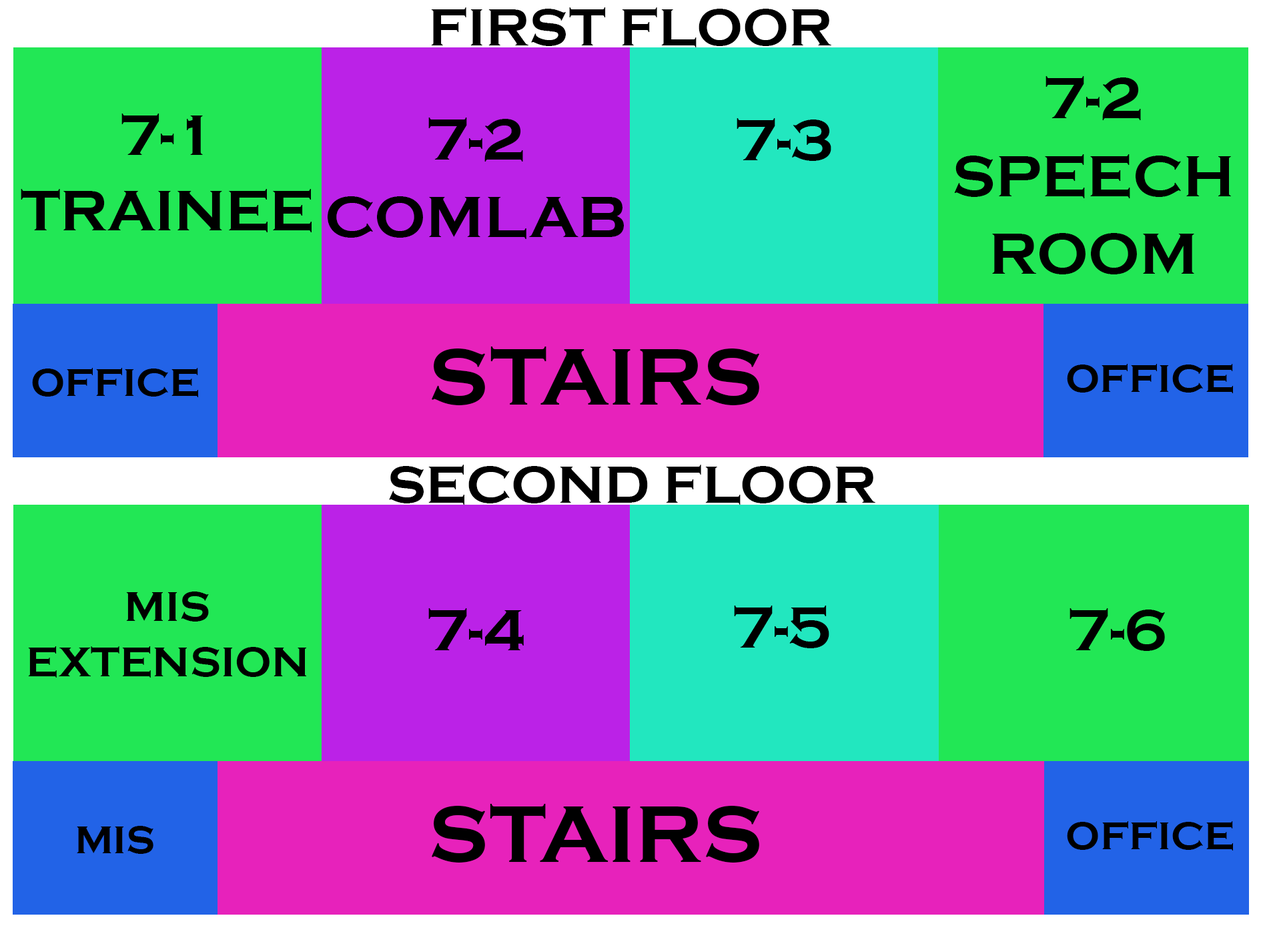
<style>
.page{position:relative;width:1261px;height:946px;background:#22e755}
.page>*{position:absolute;margin:0}
.t1{font:54.1px "CopperplateGothic-Bold";color:#000000}
.t2{font:60.2px/77.6px "CopperplateGothic-Bold";color:#000000}
.t3{font:58.5px/75.4px "CopperplateGothic-Bold";color:#000000}
.t4{font:60.2px "CopperplateGothic-Bold";color:#000000}
.t5{font:83.4px "CopperplateGothic-Bold";color:#000000}
.t6{font:39.8px "CopperplateGothic-Bold";color:#000000}
.t7{font:42.9px/55.3px "CopperplateGothic-Bold";color:#000000}
</style>
<div class="page">
<p class="t1" style="left:431px;top:7px;width:400px;height:40px">FIRST FLOOR</p>
<p class="t2" style="left:954px;top:76px;width:277px;height:198px;text-align:center">7-2<br>SPEECH<br>ROOM</p>
<p class="t3" style="left:21px;top:113px;width:291px;height:119px;text-align:center">7-1<br>TRAINEE</p>
<p class="t2" style="left:328px;top:117px;width:296px;height:122px;text-align:center">7-2<br>COMLAB</p>
<p class="t4" style="left:737px;top:118px;width:94px;height:43px">7-3</p>
<p class="t5" style="left:431px;top:346px;width:329px;height:59px">STAIRS</p>
<p class="t6" style="left:1067px;top:364px;width:166px;height:29px">OFFICE</p>
<p class="t6" style="left:32px;top:368px;width:166px;height:29px">OFFICE</p>
<p class="t1" style="left:389px;top:464px;width:486px;height:40px">SECOND FLOOR</p>
<p class="t7" style="left:28px;top:591px;width:278px;height:86px;text-align:center">MIS<br>EXTENSION</p>
<p class="t4" style="left:734px;top:605px;width:95px;height:43px">7-5</p>
<p class="t4" style="left:428px;top:608px;width:96px;height:42px">7-4</p>
<p class="t4" style="left:1070px;top:608px;width:95px;height:43px">7-6</p>
<p class="t5" style="left:431px;top:803px;width:329px;height:59px">STAIRS</p>
<p class="t6" style="left:1067px;top:821px;width:166px;height:29px">OFFICE</p>
<p class="t6" style="left:77px;top:825px;width:76px;height:28px">MIS</p>
</div>
